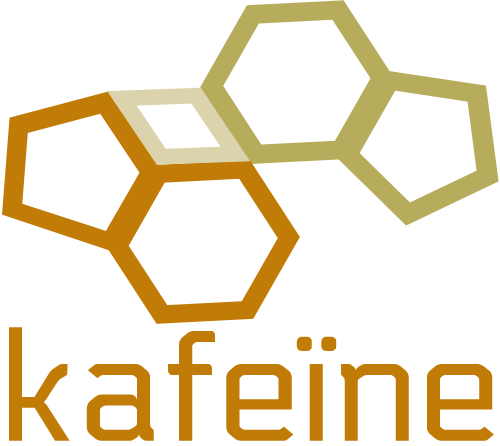
<style>
.page{position:relative;width:500px;height:446px;background:#ffffff}
.page>*{position:absolute;margin:0}
.t1{font:153px "Electrolize-Regular";color:#c17b07}
</style>
<div class="page">
<p class="t1" style="left:9px;top:327px;width:485px;height:114px">kafeïne</p>
</div>
